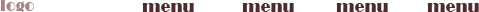
<style>
.page{position:relative;width:479px;height:12px;background:#ffffff}
.page>*{position:absolute;margin:0}
.t1{font:16px "Broadway";letter-spacing:0.01em;color:#4c2d2d}
</style>
<div class="page">
<p class="t1" style="left:142px;top:3px;width:52px;height:9px">menu</p>
<p class="t1" style="left:242px;top:3px;width:52px;height:9px">menu</p>
<p class="t1" style="left:336px;top:3px;width:52px;height:9px">menu</p>
<p class="t1" style="left:427px;top:3px;width:52px;height:9px">menu</p>
</div>
